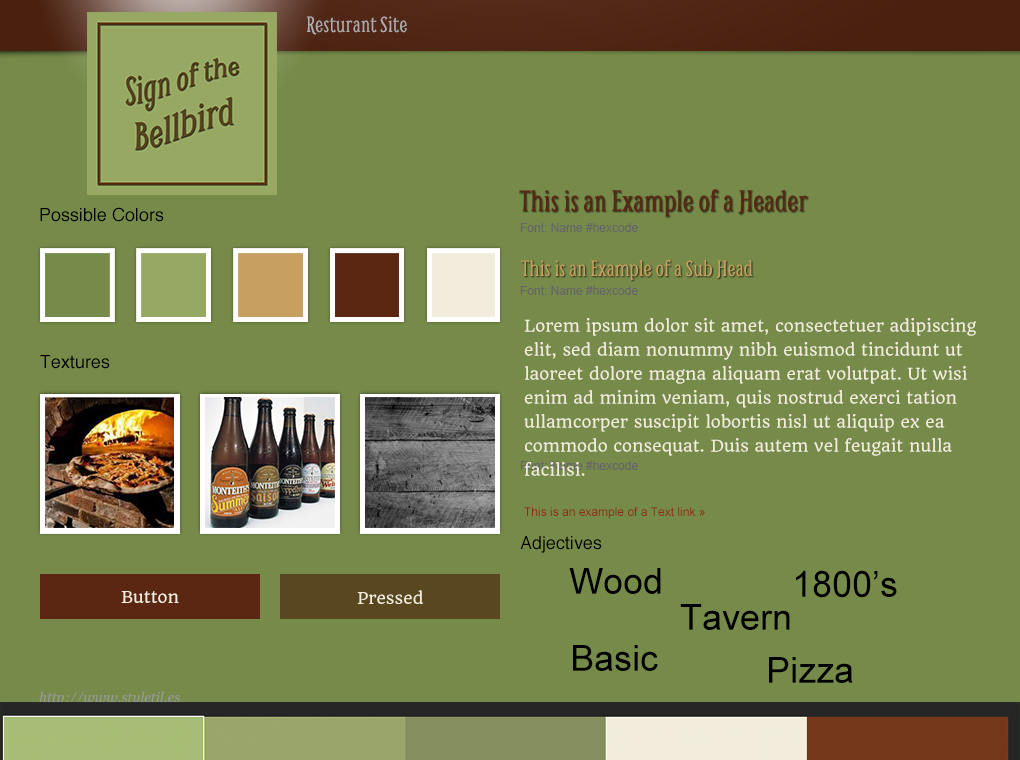
<style>
.page{position:relative;width:1020px;height:760px;background:#768b49}
.page>*{position:absolute;margin:0}
.t1{font:24px "Smythe";color:#adadad}
.t2{font:32px "Smythe";color:#5b2713}
.t3{font:18px "Helvetica";color:#000000}
.t4{font:12px "ArialMT";color:#666666}
.t5{font:24px "Smythe";color:#c7a061}
.t6{font:16px/24px "Quando-Regular";color:#f2ecdc}
.t7{font:12px "ArialMT";color:#8a2f1b}
.t8{font:36px "ArialMT";color:#000000}
.t9{font:16px "Quando-Regular";color:#f2ecdc}
.t10{font:14px/24px "Georgia-Italic"}
</style>
<div class="page">
<p class="t1" style="left:306px;top:16px;width:101px;height:19px">Resturant Site</p>
<p class="t2" style="left:519px;top:189px;width:289px;height:28px">This is an Example of a Header</p>
<p class="t3" style="left:40px;top:207px;width:124px;height:15px">Possible Colors</p>
<p class="t4" style="left:520px;top:223px;width:118px;height:9px">Font: Name #hexcode</p>
<p class="t5" style="left:521px;top:259px;width:232px;height:22px">This is an Example of a Sub Head</p>
<p class="t4" style="left:520px;top:286px;width:118px;height:9px">Font: Name #hexcode</p>
<p class="t6" style="left:524px;top:318px;width:452px;height:158px">Lorem ipsum dolor sit amet, consectetuer adipiscing elit, sed diam nonummy nibh euismod tincidunt ut laoreet dolore magna aliquam erat volutpat. Ut wisi enim ad minim veniam, quis nostrud exerci tation ullamcorper suscipit lobortis nisl ut aliquip ex ea <br>commodo consequat. Duis autem vel feugait nulla facilisi.</p>
<p class="t3" style="left:40px;top:355px;width:70px;height:14px">Textures</p>
<p class="t7" style="left:524px;top:507px;width:181px;height:12px">This is an example of a Text link »</p>
<p class="t3" style="left:520px;top:536px;width:82px;height:17px">Adjectives</p>
<p class="t8" style="left:569px;top:568px;width:92px;height:26px">Wood</p>
<p class="t8" style="left:796px;top:570px;width:101px;height:28px">1800’s</p>
<p class="t9" style="left:121px;top:591px;width:58px;height:12px">Button</p>
<p class="t9" style="left:357px;top:590px;width:67px;height:14px">Pressed</p>
<p class="t8" style="left:680px;top:604px;width:110px;height:26px">Tavern</p>
<p class="t8" style="left:573px;top:645px;width:85px;height:26px">Basic</p>
<p class="t8" style="left:769px;top:657px;width:84px;height:26px">Pizza</p>
<p class="t10" style="left:39px;top:691px;width:180px;height:38px">http://www.styletil.es<br>Template by @Samanthatoy</p>
</div>
